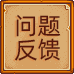
<style>
.page{position:relative;width:74px;height:74px;background:#daad72}
.page>*{position:absolute;margin:0}
.t1{font:24px/24px "AlibabaPuHuiTi-Regular";color:#56160c}
</style>
<div class="page">
<p class="t1" style="left:15px;top:14px;width:46px;height:47px;text-align:center">问题<br>反馈</p>
</div>
